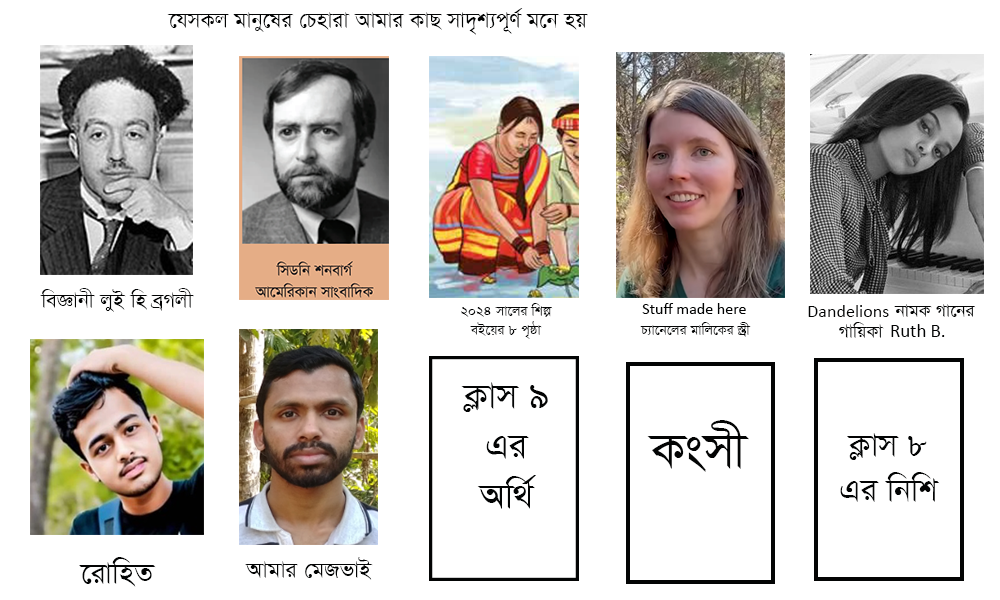
<style>
.page{position:relative;width:1000px;height:600px;background:#ffffff}
.page>*{position:absolute;margin:0}
.t1{font:18.8px "SutonnyMJ";color:#030404}
.t2{font:18.2px "SutonnyMJ";color:#030404}
.t3{font:12px "SutonnyMJ";color:#030404}
.t4{font:12px "Calibri";color:#030404}
.t5{font:13.6px "Calibri";color:#030404}
.t6{font:15.5px "SutonnyMJ";color:#030404}
.t7{font:15.7px "SutonnyMJ";color:#030404}
.t8{font:14.1px "Calibri";color:#030404}
.t9{font:31.5px "SutonnyMJ";color:#030404}
.t10{font:45.1px "SutonnyMJ";color:#030404}
.t11{font:28.3px "SutonnyMJ";color:#030404}
.t12{font:25.7px "SutonnyMJ";color:#030404}
.t13{font:19.7px "SutonnyMJ";color:#030404}
</style>
<div class="page">
<p class="t1" style="left:167px;top:8px;width:421px;height:27px">‡hmKj gvby‡li †Pnviv Avgvi KvQ mv`„k¨c~Y© g‡b nq</p>
<p class="t2" style="left:40px;top:288px;width:154px;height:24px">weÁvbx jyB wn eªMjx</p>
<p class="t3" style="left:461px;top:303px;width:92px;height:36px;text-align:center">2024 mv‡ji wkí<br>eB‡qi 8 c„ôv</p>
<p class="t4" style="left:642px;top:303px;width:104px;height:11px">Stuff made here</p>
<p class="t5" style="left:808px;top:305px;width:81px;height:12px">Dandelions</p>
<p class="t6" style="left:894px;top:304px;width:82px;height:13px">bvgK Mv‡bi</p>
<p class="t3" style="left:640px;top:322px;width:111px;height:15px">P¨v‡b‡ji gvwj‡Ki ¯Íªx</p>
<p class="t7" style="left:839px;top:322px;width:45px;height:16px">MvwqKv</p>
<p class="t8" style="left:891px;top:324px;width:54px;height:13px">Ruth B.</p>
<p class="t9" style="left:461px;top:382px;width:87px;height:127px;text-align:center">K¬vm 9<br>Gi<br>Aw_©</p>
<p class="t10" style="left:647px;top:420px;width:102px;height:52px">Ksmx</p>
<p class="t11" style="left:840px;top:433px;width:100px;height:69px;text-align:center">K¬vm 8<br>Gi wbwk</p>
<p class="t12" style="left:79px;top:557px;width:77px;height:30px">‡ivwnZ</p>
<p class="t13" style="left:245px;top:557px;width:128px;height:23px">Avgvi †gRfvB</p>
</div>
